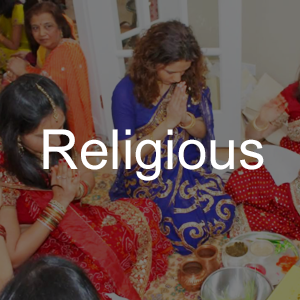
<style>
.page{position:relative;width:300px;height:300px}
.page>*{position:absolute;margin:0}
.t1{font:55px "ArialMT";color:#ffffff}
</style>
<div class="page">
<p class="t1" style="left:43px;top:129px;width:221px;height:52px">Religious</p>
</div>
